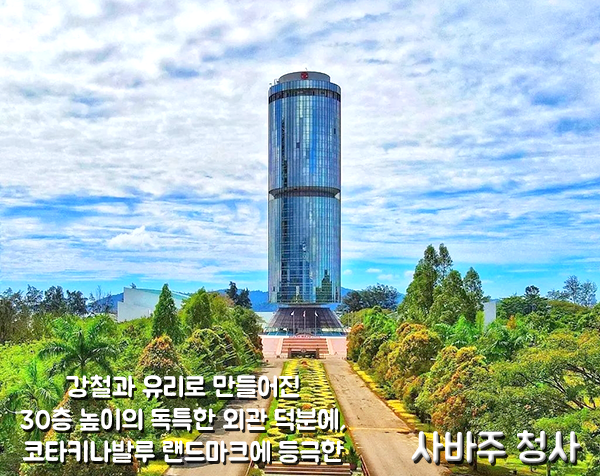
<style>
.page{position:relative;width:600px;height:476px}
.page>*{position:absolute;margin:0}
.t1{font:27px "BMJUA";color:#ffffff}
.t2{font:39.3px "BMJUA"}
</style>
<div class="page">
<p class="t1" style="left:20px;top:374px;width:326px;height:89px;text-align:center">강철과 유리로 만들어진<br>30층 높이의 독특한 외관 덕분에,<br>코타키나발루 랜드마크에 등극한</p>
<p class="t2" style="left:411px;top:430px;width:170px;height:33px">사바주 청사</p>
</div>
